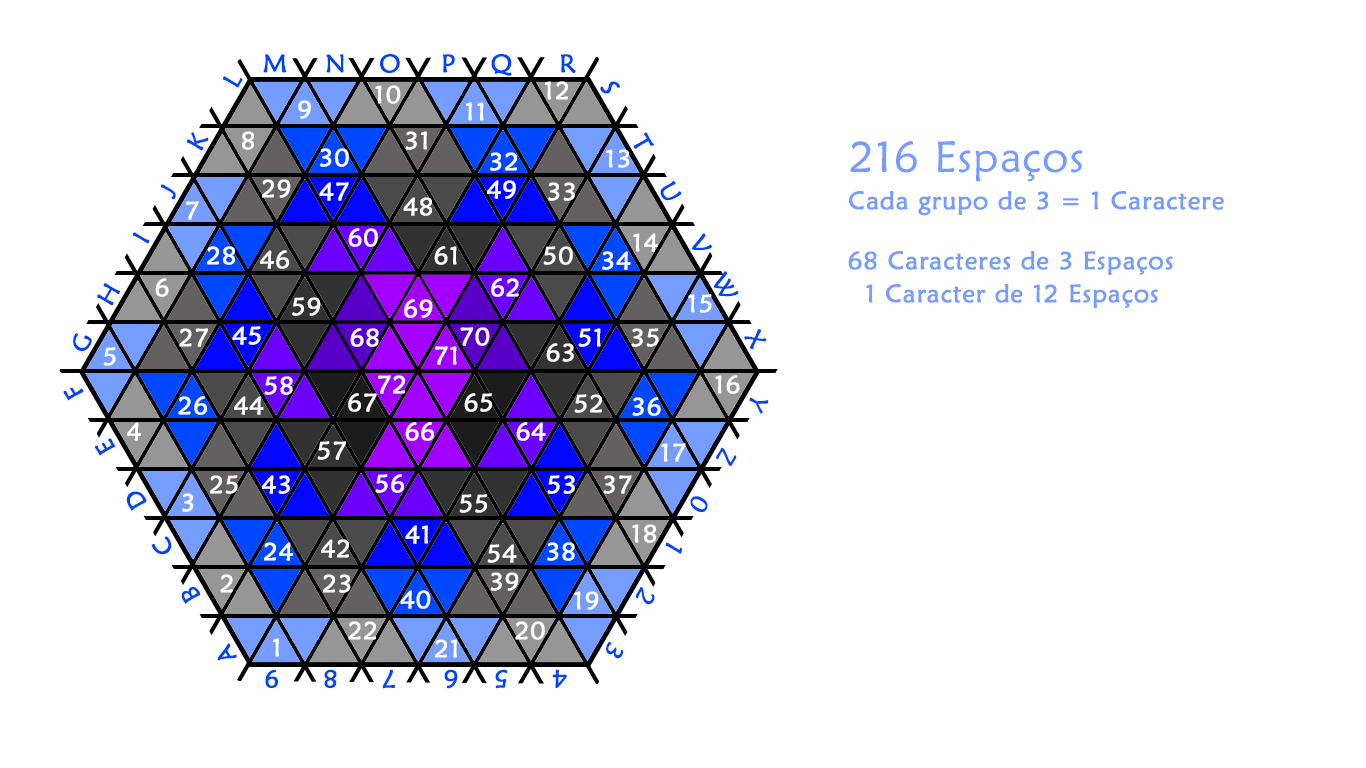
<style>
.page{position:relative;width:1366px;height:768px;background:#ffffff}
.page>*{position:absolute;margin:0}
.t1{font:25px "MaiandraGD-Regular";letter-spacing:0.025em;color:#0046f7;font-weight:bold}
.t2{font:25px "MaiandraGD-Regular";letter-spacing:0.025em;color:#ffffff;font-weight:bold}
.t3{font:43.7px "MaiandraGD-Regular";letter-spacing:0.025em;color:#759cff}
.t4{font:25px "MaiandraGD-Regular";letter-spacing:0.025em;color:#759cff;font-weight:bold}
.t5{font:25px/33.3px "MaiandraGD-Regular";letter-spacing:0.025em;color:#759cff;font-weight:bold}
</style>
<div class="page">
<p class="t1" style="left:263px;top:54px;width:313px;height:22px">M    N  O     P    Q   R</p>
<p class="t2" style="left:375px;top:85px;width:26px;height:19px">10</p>
<p class="t2" style="left:545px;top:81px;width:23px;height:19px">12</p>
<p class="t2" style="left:298px;top:100px;width:13px;height:19px">9</p>
<p class="t2" style="left:466px;top:102px;width:18px;height:19px">11</p>
<p class="t2" style="left:242px;top:131px;width:12px;height:19px">8</p>
<p class="t2" style="left:405px;top:131px;width:22px;height:19px">31</p>
<p class="t2" style="left:320px;top:148px;width:29px;height:19px">30</p>
<p class="t2" style="left:606px;top:149px;width:24px;height:19px">13</p>
<p class="t3" style="left:850px;top:141px;width:233px;height:41px">216 Espaços</p>
<p class="t2" style="left:490px;top:152px;width:27px;height:19px">32</p>
<p class="t2" style="left:262px;top:179px;width:29px;height:19px">29</p>
<p class="t2" style="left:319px;top:182px;width:30px;height:19px">47</p>
<p class="t2" style="left:487px;top:180px;width:29px;height:19px">49</p>
<p class="t2" style="left:548px;top:182px;width:27px;height:19px">33</p>
<p class="t2" style="left:403px;top:197px;width:29px;height:19px">48</p>
<p class="t4" style="left:849px;top:191px;width:375px;height:25px">Cada grupo de 3 = 1 Caractere</p>
<p class="t2" style="left:186px;top:201px;width:13px;height:19px">7</p>
<p class="t2" style="left:348px;top:228px;width:30px;height:19px">60</p>
<p class="t2" style="left:633px;top:233px;width:25px;height:19px">14</p>
<p class="t2" style="left:207px;top:246px;width:28px;height:19px">28</p>
<p class="t2" style="left:434px;top:246px;width:23px;height:19px">61</p>
<p class="t2" style="left:543px;top:246px;width:30px;height:19px">50</p>
<p class="t2" style="left:260px;top:250px;width:29px;height:19px">46</p>
<p class="t2" style="left:602px;top:251px;width:29px;height:19px">34</p>
<p class="t5" style="left:848px;top:251px;width:325px;height:57px">68 Caracteres de 3 Espaços<br>  1 Caracter de 12 Espaços</p>
<p class="t2" style="left:155px;top:278px;width:14px;height:19px">6</p>
<p class="t2" style="left:491px;top:278px;width:28px;height:19px">62</p>
<p class="t2" style="left:688px;top:294px;width:24px;height:19px">15</p>
<p class="t2" style="left:292px;top:297px;width:29px;height:19px">59</p>
<p class="t2" style="left:404px;top:299px;width:29px;height:19px">69</p>
<p class="t2" style="left:179px;top:328px;width:29px;height:19px">27</p>
<p class="t2" style="left:232px;top:326px;width:29px;height:19px">45</p>
<p class="t2" style="left:350px;top:328px;width:29px;height:19px">68</p>
<p class="t2" style="left:460px;top:327px;width:30px;height:19px">70</p>
<p class="t2" style="left:578px;top:328px;width:23px;height:19px">51</p>
<p class="t2" style="left:631px;top:328px;width:28px;height:19px">35</p>
<p class="t2" style="left:103px;top:347px;width:13px;height:19px">5</p>
<p class="t2" style="left:435px;top:346px;width:22px;height:19px">71</p>
<p class="t2" style="left:546px;top:343px;width:28px;height:19px">63</p>
<p class="t2" style="left:264px;top:376px;width:29px;height:19px">58</p>
<p class="t2" style="left:378px;top:375px;width:27px;height:19px">72</p>
<p class="t2" style="left:715px;top:375px;width:25px;height:19px">16</p>
<p class="t2" style="left:178px;top:396px;width:29px;height:19px">26</p>
<p class="t2" style="left:234px;top:396px;width:30px;height:19px">44</p>
<p class="t2" style="left:348px;top:393px;width:29px;height:19px">67</p>
<p class="t2" style="left:464px;top:393px;width:28px;height:19px">65</p>
<p class="t2" style="left:574px;top:394px;width:28px;height:19px">52</p>
<p class="t2" style="left:632px;top:397px;width:29px;height:19px">36</p>
<p class="t2" style="left:127px;top:422px;width:14px;height:19px">4</p>
<p class="t2" style="left:405px;top:422px;width:29px;height:19px">66</p>
<p class="t2" style="left:516px;top:422px;width:30px;height:19px">64</p>
<p class="t2" style="left:317px;top:441px;width:29px;height:19px">57</p>
<p class="t2" style="left:661px;top:443px;width:25px;height:19px">17</p>
<p class="t2" style="left:210px;top:475px;width:28px;height:19px">25</p>
<p class="t2" style="left:262px;top:475px;width:28px;height:19px">43</p>
<p class="t2" style="left:375px;top:474px;width:29px;height:19px">56</p>
<p class="t2" style="left:547px;top:475px;width:28px;height:19px">53</p>
<p class="t2" style="left:603px;top:475px;width:29px;height:19px">37</p>
<p class="t2" style="left:182px;top:493px;width:12px;height:19px">3</p>
<p class="t2" style="left:459px;top:494px;width:28px;height:19px">55</p>
<p class="t2" style="left:405px;top:525px;width:23px;height:19px">41</p>
<p class="t2" style="left:632px;top:524px;width:24px;height:19px">18</p>
<p class="t2" style="left:264px;top:542px;width:29px;height:19px">24</p>
<p class="t2" style="left:321px;top:539px;width:28px;height:19px">42</p>
<p class="t2" style="left:487px;top:544px;width:30px;height:19px">54</p>
<p class="t2" style="left:547px;top:542px;width:28px;height:19px">38</p>
<p class="t2" style="left:220px;top:574px;width:13px;height:19px">2</p>
<p class="t2" style="left:323px;top:574px;width:28px;height:19px">23</p>
<p class="t2" style="left:490px;top:572px;width:29px;height:19px">39</p>
<p class="t2" style="left:400px;top:590px;width:31px;height:19px">40</p>
<p class="t2" style="left:574px;top:591px;width:25px;height:19px">19</p>
<p class="t2" style="left:348px;top:621px;width:28px;height:19px">22</p>
<p class="t2" style="left:515px;top:621px;width:30px;height:19px">20</p>
<p class="t2" style="left:273px;top:638px;width:6px;height:19px">1</p>
<p class="t2" style="left:435px;top:639px;width:22px;height:19px">21</p>
<p class="t1" style="left:265px;top:669px;width:302px;height:20px;rotate:180deg">4     5    6     7     8  9</p>
</div>
